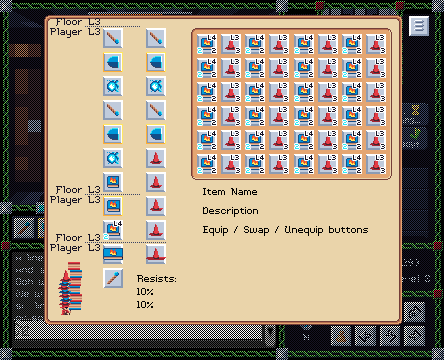
<style>
.page{position:relative;width:444px;height:360px;background:#ead4aa}
.page>*{position:absolute;margin:0}
.t1{font:16px/10px "CelticTime";color:#181425}
.t2{font:16px "CelticTime";color:#000000}
.t3{font:16px/13px "CelticTime";color:#000000}
</style>
<div class="page">
<p class="t1" style="left:50px;top:18px;width:50px;height:20px;text-align:right">Floor L3<br>Player L3</p>
<p class="t1" style="left:50px;top:186px;width:50px;height:20px;text-align:right">Floor L3<br>Player L3</p>
<p class="t2" style="left:203px;top:188px;width:165px;height:48px">Item Name<br>Description<br>Equip / Swap / Unequip buttons</p>
<p class="t1" style="left:50px;top:234px;width:50px;height:20px;text-align:right">Floor L3<br>Player L3</p>
<p class="t3" style="left:137px;top:275px;width:39px;height:33px">Resists:<br>10%<br>10%</p>
</div>
